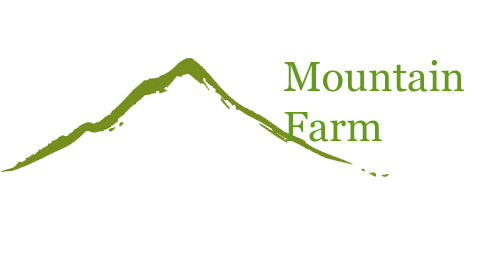
<style>
.page{position:relative;width:491px;height:261px;background:#ffffff}
.page>*{position:absolute;margin:0}
.t1{font:41.7px "Georgia";color:#649b1c}
</style>
<div class="page">
<p class="t1" style="left:284px;top:60px;width:180px;height:82px">Mountain<br>Farm</p>
</div>
